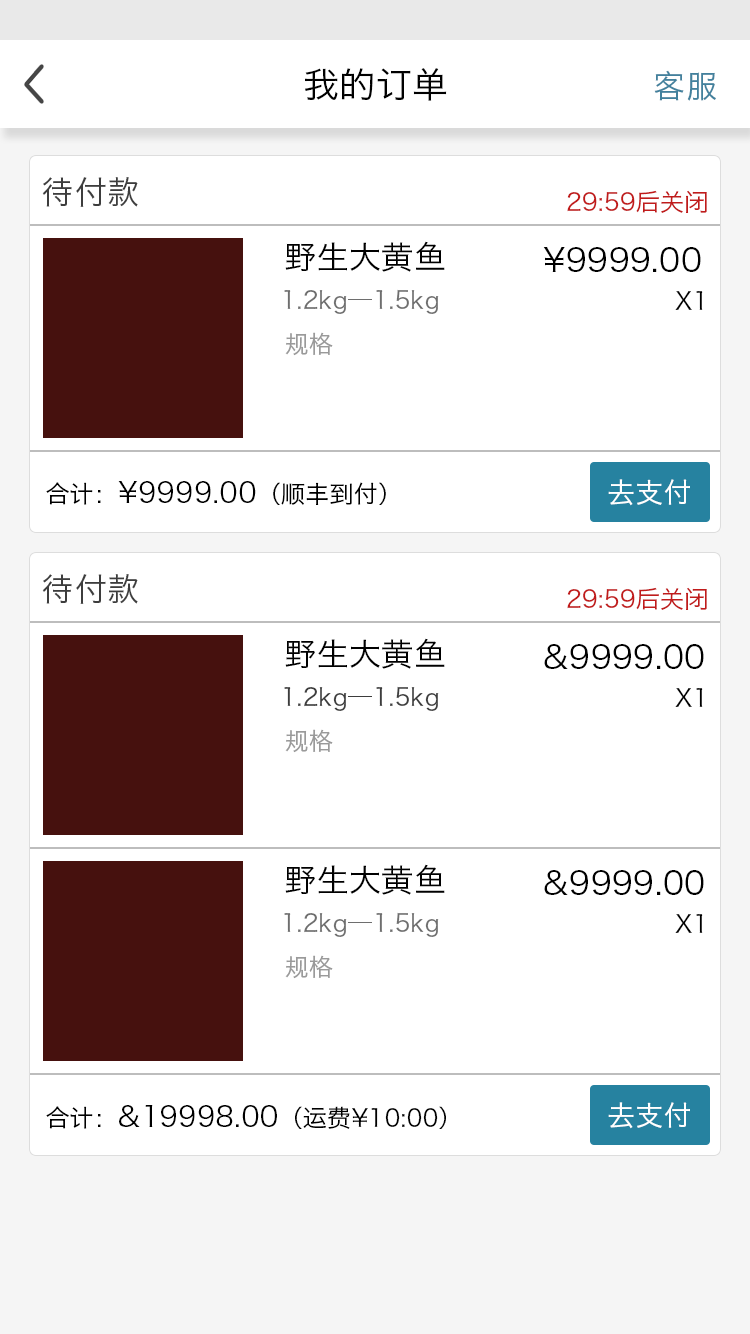
<style>
.page{position:relative;width:750px;height:1334px;background:#ffffff}
.page>*{position:absolute;margin:0}
.t1{font:36px "HiraginoSansGB-W3";color:#000000}
.t2{font:32px "HiraginoSansGB-W3";color:#42819d}
.t3{font:32px "HiraginoSansGB-W3";color:#3d3d3d}
.t4{font:24px "HiraginoSansGB-W3";color:#c11b1b}
.t5{font:32px "HiraginoSansGB-W3";color:#000000}
.t6{font:24px "HiraginoSansGB-W3";color:#6e6e6e}
.t7{font:24px "HiraginoSansGB-W3";color:#000000}
.t8{font:24px "HiraginoSansGB-W3";color:#9a9a9a}
.t9{font:28px "HiraginoSansGB-W3";color:#000000}
.t10{font:28px "HiraginoSansGB-W3";color:#ffffff}
.t11{font:24px "HiraginoSansGB-W3";color:#3d3d3d}
</style>
<div class="page">
<p class="t1" style="left:305px;top:68px;width:142px;height:33px">我的订单</p>
<p class="t2" style="left:654px;top:70px;width:62px;height:31px">客服</p>
<p class="t3" style="left:42px;top:177px;width:96px;height:30px">待付款</p>
<p class="t4" style="left:567px;top:190px;width:140px;height:23px">29:59后关闭</p>
<p class="t5" style="left:285px;top:241px;width:160px;height:31px">野生大黄鱼</p>
<p class="t5" style="left:543px;top:247px;width:158px;height:25px">¥9999.00</p>
<p class="t6" style="left:284px;top:289px;width:155px;height:25px">1.2kg—1.5kg</p>
<p class="t7" style="left:675px;top:291px;width:28px;height:19px">X1</p>
<p class="t8" style="left:285px;top:332px;width:48px;height:24px">规格</p>
<p class="t9" style="left:46px;top:481px;width:340px;height:24px"><span class="t7">合计：</span>¥9999.00<span class="t7">（顺丰到付）</span></p>
<p class="t10" style="left:608px;top:479px;width:82px;height:27px">去支付</p>
<p class="t3" style="left:42px;top:574px;width:96px;height:30px">待付款</p>
<p class="t4" style="left:567px;top:587px;width:140px;height:23px">29:59后关闭</p>
<p class="t5" style="left:285px;top:638px;width:160px;height:31px">野生大黄鱼</p>
<p class="t5" style="left:544px;top:644px;width:160px;height:25px">&amp;9999.00</p>
<p class="t11" style="left:284px;top:686px;width:155px;height:25px">1.2kg—1.5kg</p>
<p class="t7" style="left:675px;top:688px;width:28px;height:19px">X1</p>
<p class="t8" style="left:285px;top:729px;width:48px;height:24px">规格</p>
<p class="t5" style="left:285px;top:864px;width:160px;height:31px">野生大黄鱼</p>
<p class="t5" style="left:544px;top:870px;width:160px;height:25px">&amp;9999.00</p>
<p class="t6" style="left:284px;top:912px;width:155px;height:25px">1.2kg—1.5kg</p>
<p class="t7" style="left:675px;top:914px;width:28px;height:19px">X1</p>
<p class="t8" style="left:285px;top:955px;width:48px;height:24px">规格</p>
<p class="t7" style="left:46px;top:1105px;width:400px;height:24px">合计：<span class="t9">&amp;19998.00</span>（运费¥10:00）</p>
<p class="t10" style="left:608px;top:1102px;width:82px;height:27px">去支付</p>
</div>
